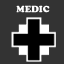
<style>
.page{position:relative;width:64px;height:64px;background:#333333}
.page>*{position:absolute;margin:0}
.t1{font:9px "CooperBlackStd";color:#ffffff}
</style>
<div class="page">
<p class="t1" style="left:16px;top:5px;width:34px;height:8px">MEDIC</p>
</div>
